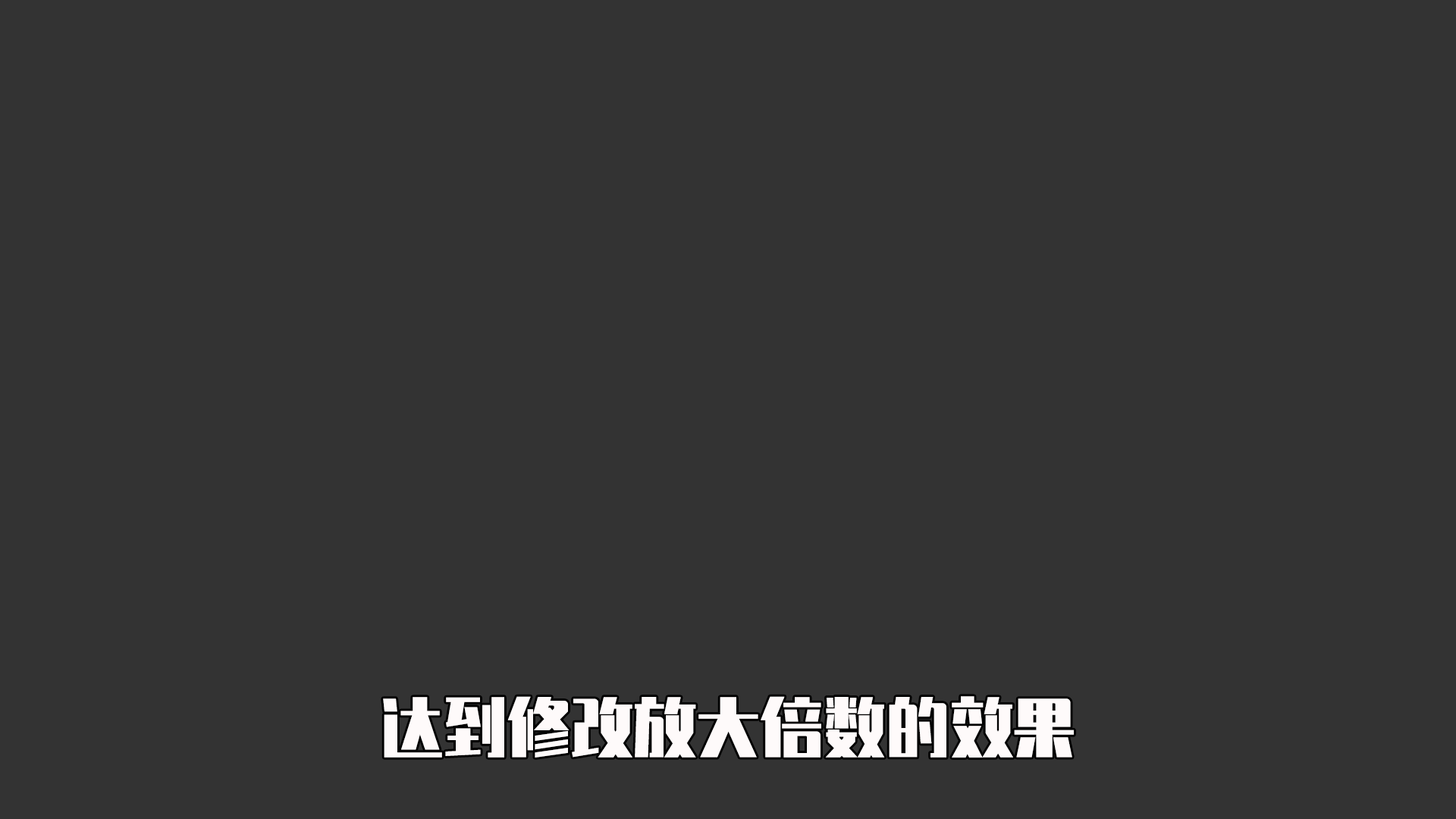
<style>
.page{position:relative;width:1456px;height:819px;background:#333333}
.page>*{position:absolute;margin:0}
.t1{font:63.2px "ZhenyanGB-Regular";color:#fefafa}
</style>
<div class="page">
<p class="t1" style="left:383px;top:696px;width:691px;height:62px">达到修改放大倍数的效果</p>
</div>
